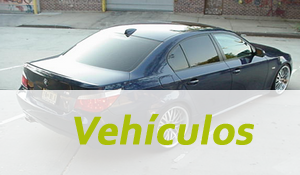
<style>
.page{position:relative;width:300px;height:175px}
.page>*{position:absolute;margin:0}
.t1{font:41.7px "Corbel-Bold";letter-spacing:0.005em;color:#abbf08;font-weight:bold;font-style:italic}
</style>
<div class="page">
<p class="t1" style="left:74px;top:114px;width:180px;height:31px">Vehículos</p>
</div>
